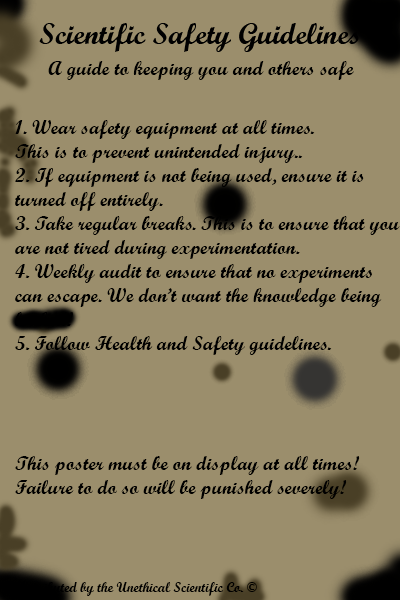
<style>
.page{position:relative;width:400px;height:600px;background:#9b8e6c}
.page>*{position:absolute;margin:0}
.t1{font:20px "ScriptMTBold";color:#000000}
.t2{font:14px "ScriptMTBold";color:#000000}
</style>
<div class="page">
<p class="t1" style="left:48px;top:61px;width:306px;height:19px">A guide to keeping you and others safe</p>
<p class="t1" style="left:15px;top:120px;width:385px;height:476px">1. Wear safety equipment at all times.<br>This is to prevent unintended injury..<br>2. If equipment is not being used, ensure it is turned off entirely.<br>3. Take regular breaks. This is to ensure that you are not tired during experimentation.<br>4. Weekly audit to ensure that no experiments can escape. We don’t want the knowledge being leaked!<br>5. Follow Health and Safety guidelines.<br><br><br><br><br>This poster must be on display at all times!<br>Failure to do so will be punished severely!<br><br><br><span class="t2"><br><br>Distributed by the Unethical Scientific Co. ©</span></p>
</div>
